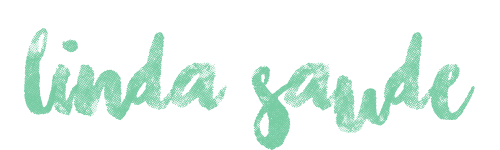
<style>
.page{position:relative;width:500px;height:150px;background:#ffffff}
.page>*{position:absolute;margin:0}
.t1{font:139px "ChasingEmbers";color:#77cca4}
</style>
<div class="page">
<p class="t1" style="left:24px;top:28px;width:451px;height:122px">Linda Saude</p>
</div>
